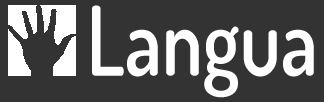
<style>
.page{position:relative;width:324px;height:102px;background:#333333}
.page>*{position:absolute;margin:0}
.t1{font:96px "Dosis-SemiBold";color:#ffffff;scale:0.83 1}
</style>
<div class="page">
<p class="t1" style="left:92px;top:5px;width:222px;height:93px">Langua</p>
</div>
